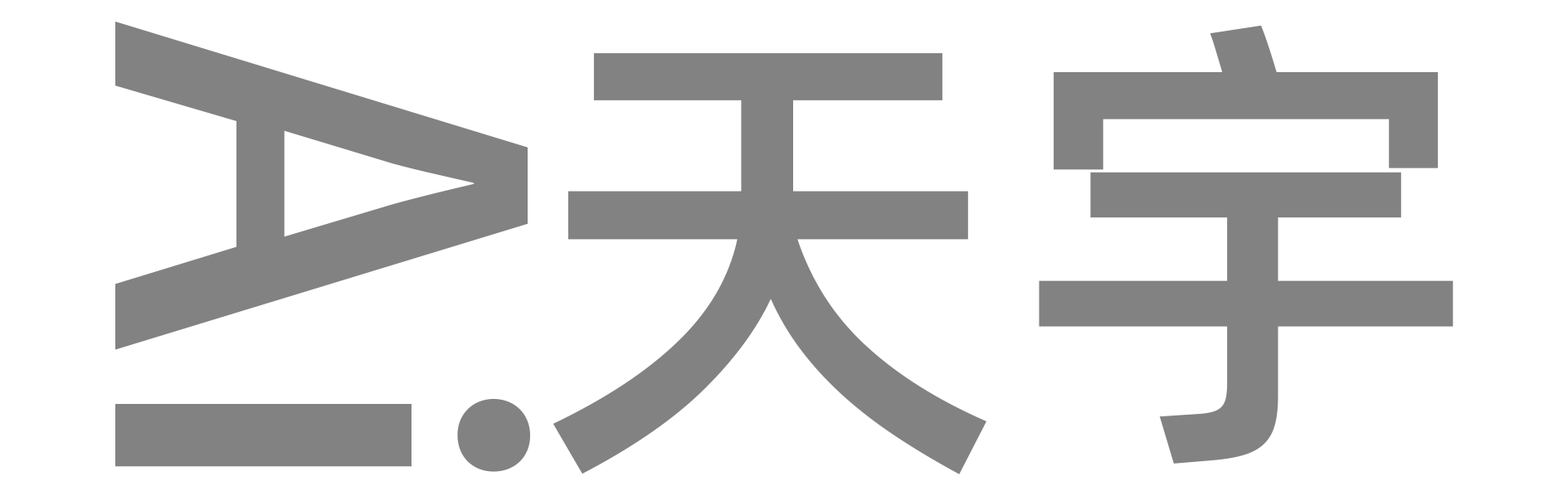
<style>
.page{position:relative;width:1568px;height:496px;background:#ffffff}
.page>*{position:absolute;margin:0}
.t1{font:537.9px "AdobeHeitiStd-Regular";color:#828282}
.t2{font:484.2px "AlibabaPuHuiTi-Medium";color:#828282}
</style>
<div class="page">
<p class="t1" style="left:115px;top:22px;width:415px;height:450px;rotate:90deg">Ai</p>
<p class="t2" style="left:553px;top:25px;width:901px;height:450px">天宇</p>
</div>
